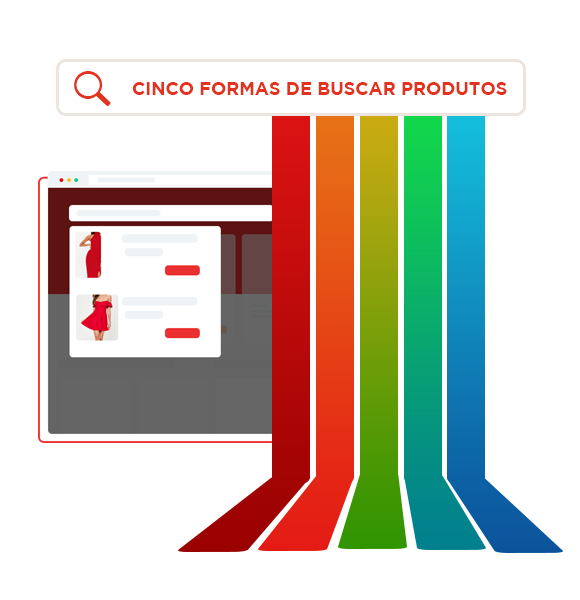
<style>
.page{position:relative;width:580px;height:600px;background:#ffffff}
.page>*{position:absolute;margin:0}
.t1{font:18px "Gotham-Bold";color:#e1331d}
</style>
<div class="page">
<p class="t1" style="left:132px;top:82px;width:375px;height:13px">CINCO FORMAS DE BUSCAR PRODUTOS</p>
</div>
